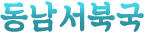
<style>
.page{position:relative;width:145px;height:35px;background:#ffffff}
.page>*{position:absolute;margin:0}
.t1{font:33px "SDKukdetopokki-aLt";letter-spacing:0.06em;font-weight:bold;scale:0.9 1}
.t2{font:33px "SDKukdetopokki-aLt";letter-spacing:0.06em;color:#32a2b1;font-weight:bold;scale:0.9 1}
</style>
<div class="page">
<p class="t1" style="left:0px;top:2px;width:28px;height:30px">동</p>
<p class="t1" style="left:30px;top:1px;width:27px;height:31px">남</p>
<p class="t2" style="left:59px;top:1px;width:26px;height:31px">서</p>
<p class="t1" style="left:87px;top:1px;width:28px;height:31px">북</p>
<p class="t1" style="left:116px;top:2px;width:28px;height:30px">국</p>
</div>
